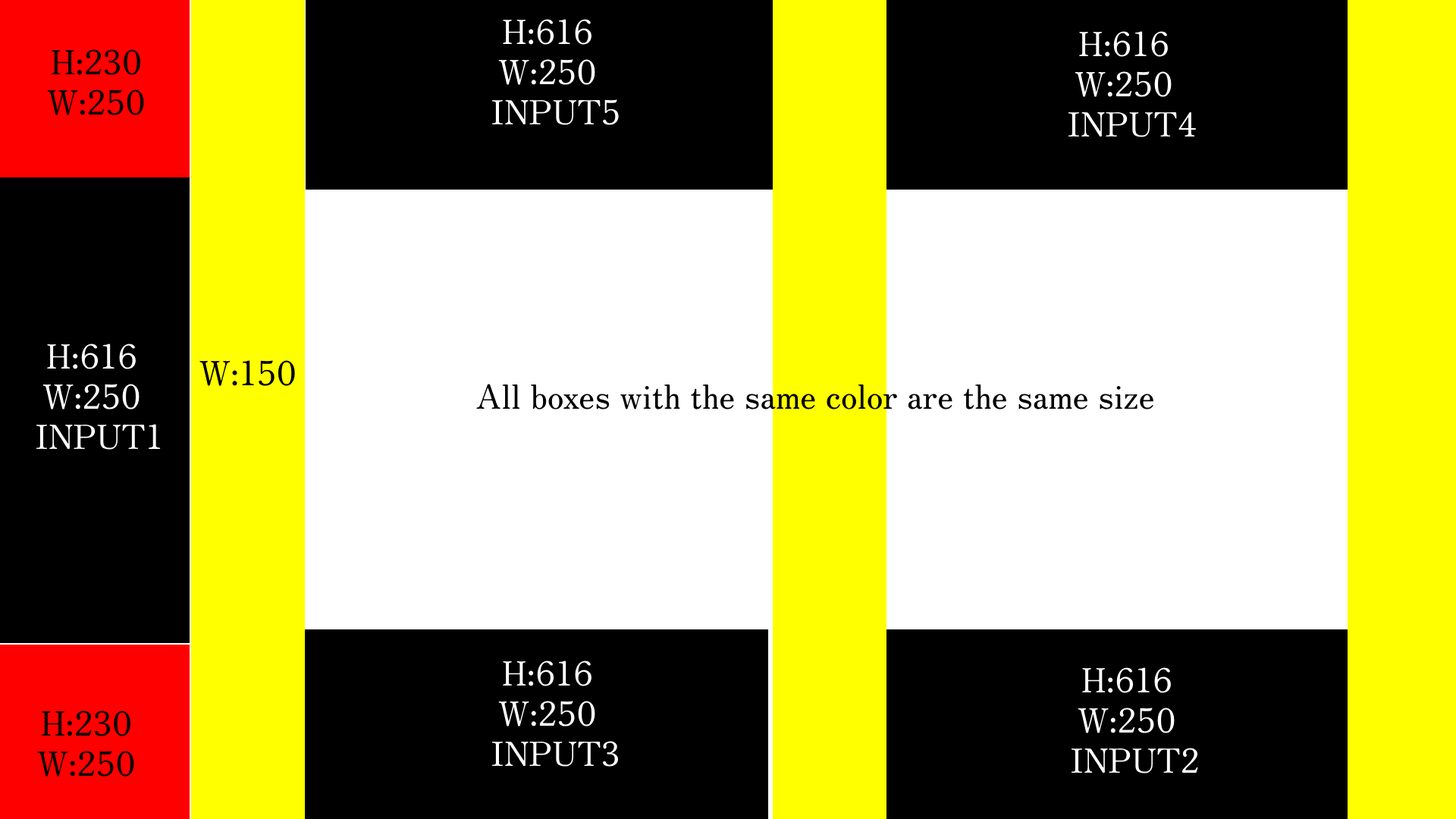
<style>
.page{position:relative;width:1456px;height:819px;background:#000000}
.page>*{position:absolute;margin:0}
.t1{font:33.4px "ZenOldMincho-Regular";color:#ffffff}
.t2{font:33.4px "ZenOldMincho-Regular";color:#000000}
</style>
<div class="page">
<p class="t1" style="left:491px;top:19px;width:128px;height:106px;text-align:center">H:616<br>W:250<br>INPUT5</p>
<p class="t1" style="left:1068px;top:31px;width:128px;height:106px;text-align:center">H:616<br>W:250<br>INPUT4</p>
<p class="t2" style="left:47px;top:49px;width:97px;height:66px;text-align:center">H:230<br>W:250</p>
<p class="t1" style="left:36px;top:344px;width:125px;height:106px;text-align:center">H:616<br>W:250<br>INPUT1</p>
<p class="t2" style="left:199px;top:360px;width:96px;height:26px">W:150</p>
<p class="t2" style="left:476px;top:384px;width:677px;height:25px">All boxes with the same color are the same size</p>
<p class="t1" style="left:491px;top:660px;width:128px;height:107px;text-align:center">H:616<br>W:250<br>INPUT3</p>
<p class="t1" style="left:1071px;top:667px;width:127px;height:106px;text-align:center">H:616<br>W:250<br>INPUT2</p>
<p class="t2" style="left:37px;top:711px;width:97px;height:66px;text-align:center">H:230<br>W:250</p>
</div>
